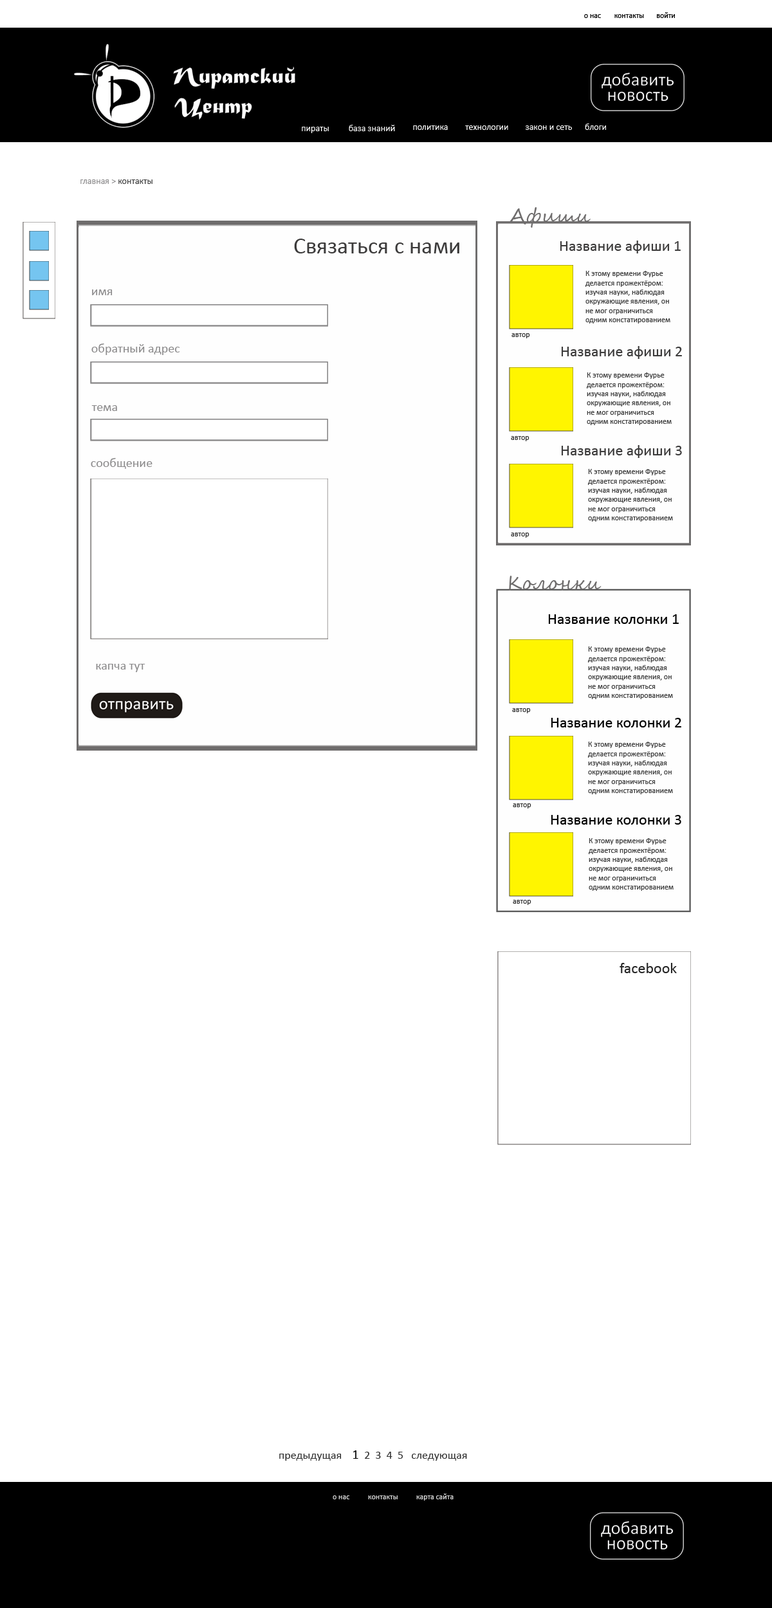
<style>
.page{position:relative;width:772px;height:1608px;background:#ffffff}
.page>*{position:absolute;margin:0}
.t1{font:7.7px "Calibri";color:#000000}
.t2{font:9px "Calibri";color:#ffffff}
.t3{font:9px "Calibri";color:#8c8b8c}
.t4{font:9px "Calibri";color:#3d3d3d}
.t5{font:19.3px "SegoeScript";color:#6f6d6d}
.t6{font:23.1px "Calibri";color:#3c3b3b}
.t7{font:15.4px "Calibri";color:#3c3b3b}
.t8{font:7.7px "Calibri";color:#3d3d3d}
.t9{font:7.7px "Calibri";color:#3c3b3b}
.t10{font:12.9px "Calibri";color:#8c8b8c}
.t11{font:7.7px "Calibri";color:#323232}
.t12{font:15.4px "Calibri";color:#000000}
.t13{font:15.4px "Calibri";color:#272727}
.t14{font:11.6px "Calibri";color:#323232}
.t15{font:12.9px "Calibri";color:#000000}
.t16{font:7.7px "Calibri";color:#dedede}
</style>
<div class="page">
<p class="t1" style="left:584px;top:14px;width:17px;height:4px">о нас</p>
<p class="t1" style="left:614px;top:14px;width:30px;height:4px">контакты</p>
<p class="t1" style="left:657px;top:12px;width:18px;height:6px">войти</p>
<p class="t2" style="left:349px;top:125px;width:46px;height:6px">база знаний</p>
<p class="t2" style="left:413px;top:125px;width:35px;height:5px">политика</p>
<p class="t2" style="left:465px;top:125px;width:43px;height:5px">технологии</p>
<p class="t2" style="left:525px;top:125px;width:47px;height:5px">закон и сеть</p>
<p class="t2" style="left:584px;top:123px;width:22px;height:7px">блоги</p>
<p class="t2" style="left:302px;top:127px;width:27px;height:6px">пираты</p>
<p class="t3" style="left:80px;top:179px;width:72px;height:5px">главная &gt;<span class="t4"> контакты</span></p>
<p class="t5" style="left:509px;top:207px;width:81px;height:21px">Афиши</p>
<p class="t6" style="left:294px;top:239px;width:165px;height:14px">Связаться с нами</p>
<p class="t7" style="left:559px;top:240px;width:121px;height:13px">Название афиши 1</p>
<p class="t8" style="left:585px;top:271px;width:85px;height:52px">К этому времени Фурье делается прожектёром: изучая науки, наблюдая окружающие явления, он не мог ограничиться одним констатированием<span class="t9"> встречавшихся несовершенств или даже только критикой их</span></p>
<p class="t10" style="left:92px;top:289px;width:21px;height:6px">имя</p>
<p class="t11" style="left:511px;top:333px;width:19px;height:5px">автор</p>
<p class="t10" style="left:91px;top:343px;width:89px;height:12px">обратный адрес</p>
<p class="t7" style="left:561px;top:346px;width:121px;height:13px">Название афиши 2</p>
<p class="t8" style="left:586px;top:372px;width:85px;height:53px">К этому времени Фурье делается прожектёром: изучая науки, наблюдая окружающие явления, он не мог ограничиться одним констатированием <span class="t9">встречавшихся несовершенств или даже только критикой их</span></p>
<p class="t10" style="left:91px;top:405px;width:26px;height:6px">тема</p>
<p class="t11" style="left:511px;top:436px;width:18px;height:5px">автор</p>
<p class="t7" style="left:561px;top:445px;width:121px;height:13px">Название афиши 3</p>
<p class="t10" style="left:91px;top:458px;width:61px;height:11px">сообщение</p>
<p class="t8" style="left:588px;top:469px;width:85px;height:52px">К этому времени Фурье делается прожектёром: изучая науки, наблюдая окружающие явления, он не мог ограничиться одним констатированием<span class="t9"> встречавшихся несовершенств или даже только критикой их</span></p>
<p class="t11" style="left:511px;top:532px;width:18px;height:6px">автор</p>
<p class="t5" style="left:509px;top:575px;width:92px;height:15px">Колонки</p>
<p class="t12" style="left:548px;top:614px;width:130px;height:10px">Название колонки 1</p>
<p class="t8" style="left:588px;top:646px;width:85px;height:53px">К этому времени Фурье делается прожектёром: изучая науки, наблюдая окружающие явления, он не мог ограничиться одним констатированием<span class="t9"> встречавшихся несовершенств или даже только критикой их</span></p>
<p class="t10" style="left:96px;top:664px;width:49px;height:8px">капча тут</p>
<p class="t11" style="left:512px;top:708px;width:18px;height:5px">автор</p>
<p class="t12" style="left:550px;top:718px;width:131px;height:9px">Название колонки 2</p>
<p class="t8" style="left:588px;top:741px;width:85px;height:53px">К этому времени Фурье делается прожектёром: изучая науки, наблюдая окружающие явления, он не мог ограничиться одним констатированием<span class="t9"> встречавшихся несовершенств или даже только критикой их</span></p>
<p class="t11" style="left:512px;top:803px;width:19px;height:5px">автор</p>
<p class="t12" style="left:550px;top:815px;width:131px;height:9px">Название колонки 3</p>
<p class="t8" style="left:588px;top:838px;width:85px;height:53px">К этому времени Фурье делается прожектёром: изучая науки, наблюдая окружающие явления, он не мог ограничиться одним констатированием<span class="t9"> встречавшихся несовершенств или даже только критикой их</span></p>
<p class="t11" style="left:512px;top:900px;width:19px;height:5px">автор</p>
<p class="t13" style="left:619px;top:963px;width:57px;height:10px">facebook</p>
<p class="t14" style="left:279px;top:1450px;width:188px;height:10px">предыдущая    <span class="t15">1 </span> 2  3  4  5   следующая</p>
<p class="t16" style="left:416px;top:1493px;width:37px;height:7px">карта сайта</p>
<p class="t16" style="left:332px;top:1495px;width:18px;height:4px">о нас</p>
<p class="t16" style="left:368px;top:1495px;width:29px;height:4px">контакты</p>
</div>
